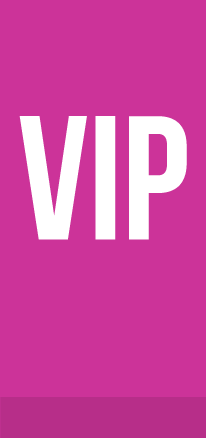
<style>
.page{position:relative;width:206px;height:438px;background:#cc3399}
.page>*{position:absolute;margin:0}
.t1{font:176.2px "BebasNeue";color:#ffffff}
</style>
<div class="page">
<p class="t1" style="left:19px;top:116px;width:168px;height:124px">VIP</p>
</div>
